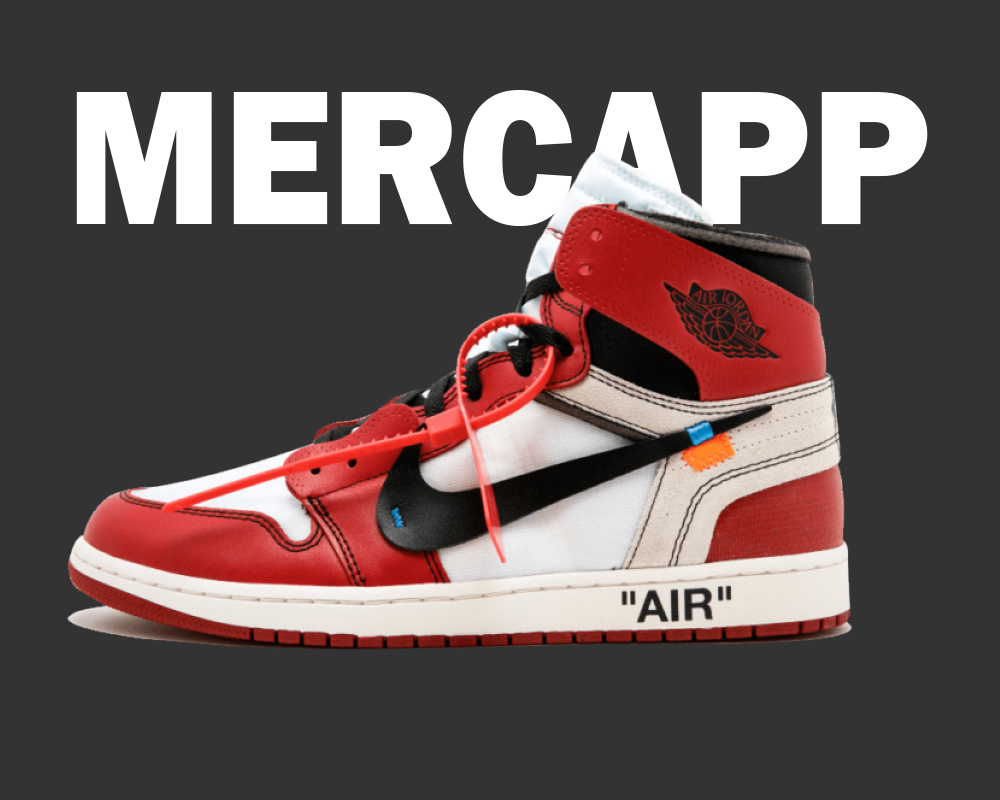
<style>
.page{position:relative;width:1000px;height:800px;background:#333333}
.page>*{position:absolute;margin:0}
.t1{font:197.7px "FranklinGothic-Heavy";color:#ffffff;scale:0.94 1}
</style>
<div class="page">
<p class="t1" style="left:76px;top:90px;width:852px;height:136px">MERCAPP</p>
</div>
